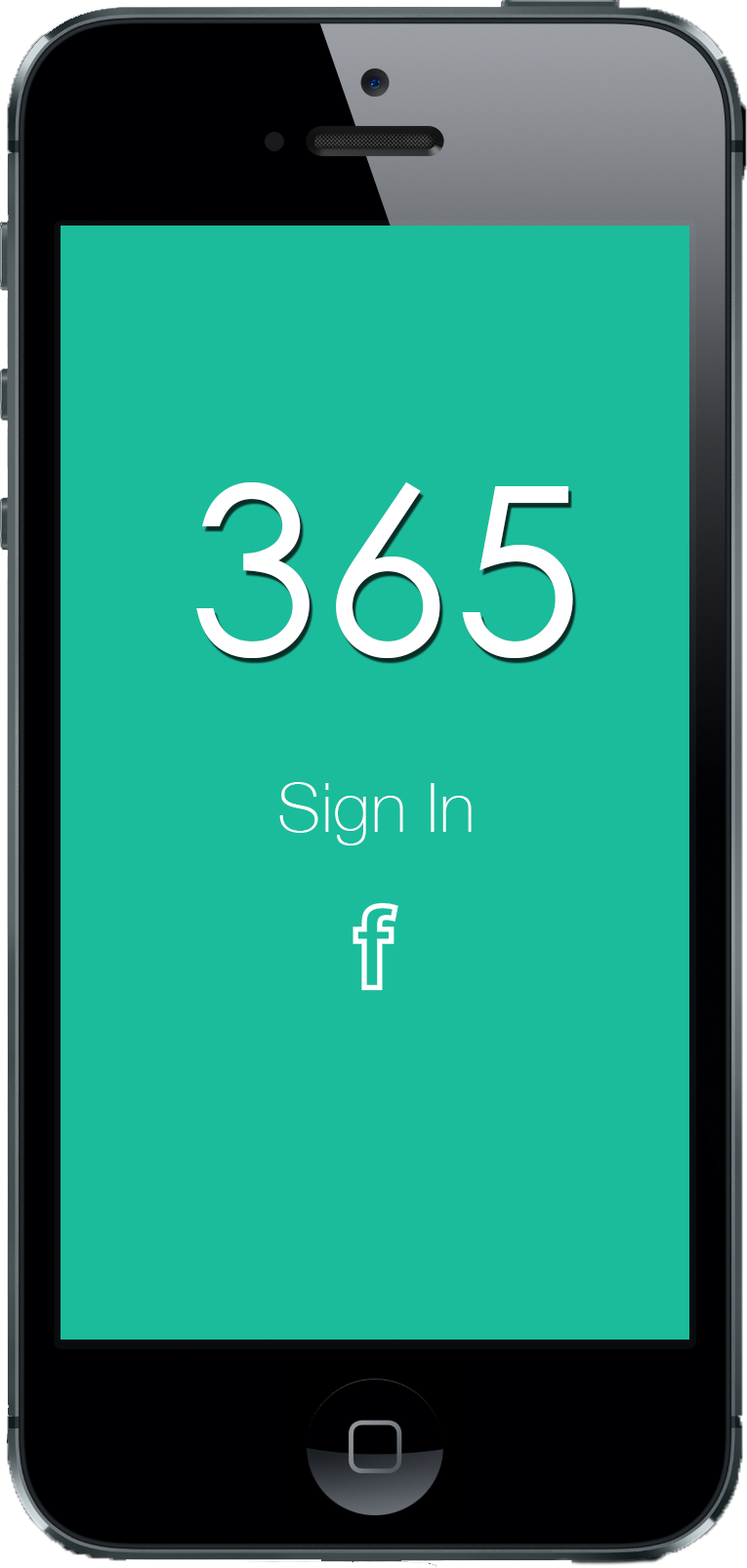
<style>
.page{position:relative;width:747px;height:1568px;background:#1abc9c}
.page>*{position:absolute;margin:0}
.t1{font:234.3px "CenturyGothic";letter-spacing:0.01em;color:#ffffff}
.t2{font:68.3px "HelveticaNeue-Thin";letter-spacing:0.01em;color:#ffffff}
</style>
<div class="page">
<p class="t1" style="left:196px;top:482px;width:377px;height:176px">365</p>
<p class="t2" style="left:279px;top:782px;width:193px;height:64px">Sign In</p>
</div>
